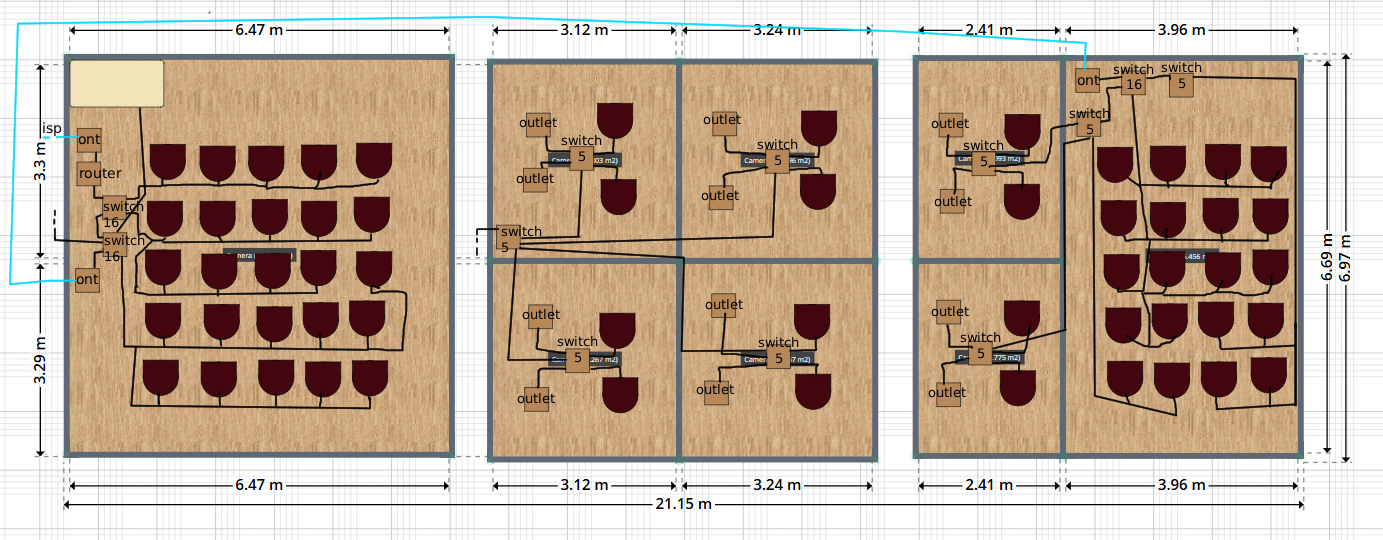
<style>
.page{position:relative;width:1383px;height:540px;background:#ffffff}
.page>*{position:absolute;margin:0}
.t1{font:13.1px "DejaVuSans";color:#000000}
.t2{font:14px "DejaVuSans";color:#000000}
</style>
<div class="page">
<p class="t1" style="left:1113px;top:64px;width:41px;height:26px;text-align:center">switch<br>16</p>
<p class="t1" style="left:1161px;top:62px;width:41px;height:27px;text-align:center">switch<br>5</p>
<p class="t1" style="left:1161px;top:62px;width:41px;height:27px;text-align:center">switch<br>5</p>
<p class="t2" style="left:1077px;top:75px;width:23px;height:11px">ont</p>
<p class="t1" style="left:1069px;top:108px;width:41px;height:27px;text-align:center">switch<br>5</p>
<p class="t2" style="left:43px;top:122px;width:19px;height:14px">isp</p>
<p class="t1" style="left:519px;top:117px;width:38px;height:11px">outlet</p>
<p class="t1" style="left:703px;top:114px;width:38px;height:11px">outlet</p>
<p class="t1" style="left:931px;top:118px;width:38px;height:11px">outlet</p>
<p class="t2" style="left:78px;top:134px;width:23px;height:11px">ont</p>
<p class="t1" style="left:561px;top:135px;width:41px;height:27px;text-align:center">switch<br>5</p>
<p class="t1" style="left:757px;top:139px;width:41px;height:27px;text-align:center">switch<br>5</p>
<p class="t1" style="left:963px;top:140px;width:41px;height:27px;text-align:center">switch<br>5</p>
<p class="t2" style="left:80px;top:168px;width:42px;height:11px">router</p>
<p class="t1" style="left:516px;top:173px;width:38px;height:11px">outlet</p>
<p class="t1" style="left:701px;top:190px;width:38px;height:11px">outlet</p>
<p class="t1" style="left:934px;top:196px;width:38px;height:11px">outlet</p>
<p class="t1" style="left:103px;top:201px;width:41px;height:27px">switch<br>16</p>
<p class="t1" style="left:501px;top:226px;width:41px;height:27px">switch<br>5</p>
<p class="t1" style="left:104px;top:235px;width:41px;height:27px">switch<br>16</p>
<p class="t2" style="left:76px;top:274px;width:23px;height:11px">ont</p>
<p class="t1" style="left:705px;top:299px;width:38px;height:11px">outlet</p>
<p class="t1" style="left:522px;top:309px;width:38px;height:11px">outlet</p>
<p class="t1" style="left:931px;top:306px;width:38px;height:11px">outlet</p>
<p class="t1" style="left:557px;top:336px;width:41px;height:27px;text-align:center">switch<br>5</p>
<p class="t1" style="left:758px;top:337px;width:41px;height:27px;text-align:center">switch<br>5</p>
<p class="t1" style="left:960px;top:332px;width:41px;height:27px;text-align:center">switch<br>5</p>
<p class="t1" style="left:696px;top:384px;width:38px;height:11px">outlet</p>
<p class="t1" style="left:928px;top:387px;width:38px;height:11px">outlet</p>
<p class="t1" style="left:517px;top:393px;width:38px;height:11px">outlet</p>
</div>
